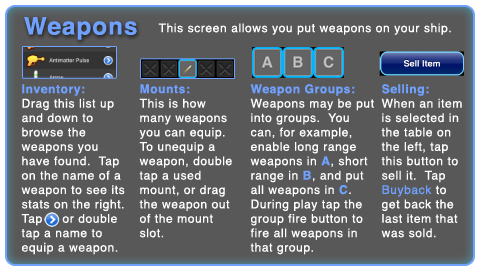
<style>
.page{position:relative;width:480px;height:271px;background:#595859}
.page>*{position:absolute;margin:0}
.t1{font:24px "Helvetica-Bold";letter-spacing:0.05em;color:#70a1fe}
.t2{font:12px "Helvetica";letter-spacing:0.05em;color:#ffffff}
.t3{font:12px "Helvetica-Bold";letter-spacing:0.05em;color:#70a1fe}
.t4{font:12px "Helvetica";letter-spacing:0.05em;color:#70a1fe}
</style>
<div class="page">
<p class="t1" style="left:24px;top:17px;width:113px;height:23px">Weapons</p>
<p class="t2" style="left:158px;top:23px;width:293px;height:12px">This screen allows you put weapons on your ship.</p>
<p class="t2" style="left:21px;top:84px;width:104px;height:171px"><span class="t3">Inventory:<br></span>Drag this list up and down to browse the weapons you have found.  Tap on the name of a weapon to see its stats on the right.  Tap     or double tap a name to equip a weapon.</p>
<p class="t2" style="left:139px;top:84px;width:93px;height:154px"><span class="t3">Mounts:<br></span>This is how many weapons you can equip.  To unequip a weapon, double tap a used mount, or drag the weapon out of the mount slot.</p>
<p class="t2" style="left:250px;top:84px;width:124px;height:171px"><span class="t3">Weapon Groups:<br></span>Weapons may be put into groups.  You can, for example, enable long range weapons in <span class="t3">A</span>, short range in <span class="t3">B</span>, and put all weapons in <span class="t3">C</span>.  During play tap the group fire button to fire all weapons in that group.</p>
<p class="t2" style="left:381px;top:84px;width:81px;height:154px"><span class="t3">Selling:<br></span>When an item is selected in the table on the left, tap this button to sell it.  Tap <span class="t4">Buyback</span> to get back the last item that was sold.</p>
</div>
